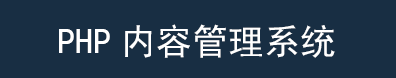
<style>
.page{position:relative;width:396px;height:78px;background:#182e43}
.page>*{position:absolute;margin:0}
.t1{font:36px "SimHei";color:#ffffff}
</style>
<div class="page">
<p class="t1" style="left:59px;top:24px;width:276px;height:34px">PHP内容管理系统</p>
</div>
